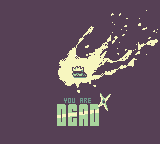
<style>
.page{position:relative;width:160px;height:144px;background:#564055}
.page>*{position:absolute;margin:0}
.t1{font:5px "Teeny-Tiny-Pixls";color:#6e9a8b}
.t2{font:30px "AsecticaSimpleDemo";color:#a9d59d}
</style>
<div class="page">
<p class="t1" style="left:64px;top:98px;width:27px;height:5px">YOU ARE</p>
<p class="t2" style="left:57px;top:104px;width:42px;height:22px">DEAD</p>
</div>
